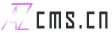
<style>
.page{position:relative;width:112px;height:35px;background:#ffffff}
.page>*{position:absolute;margin:0}
.t1{font:19.2px "MFJianHei_Noncommercial-Regular";letter-spacing:0.34em;color:#313232;font-weight:bold;scale:0.6 1}
</style>
<div class="page">
<p class="t1" style="left:36px;top:11px;width:72px;height:18px">CMS.CN</p>
</div>
